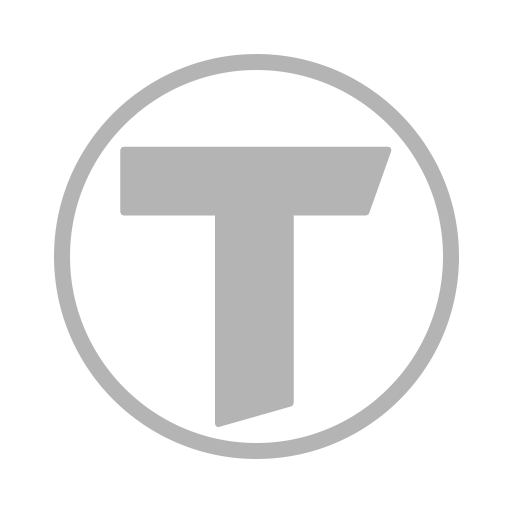
<style>
.page{position:relative;width:512px;height:512px;background:#ffffff}
.page>*{position:absolute;margin:0}
.t1{font:400px "JLinXin";color:#b4b4b4}
</style>
<div class="page">
<p class="t1" style="left:123px;top:149px;width:266px;height:276px">T</p>
</div>
